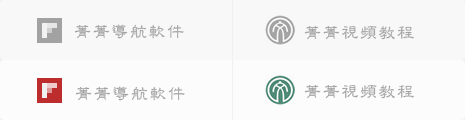
<style>
.page{position:relative;width:465px;height:120px;background:#fcfcfc}
.page>*{position:absolute;margin:0}
.t1{font:18px "TJenLei-Medium";letter-spacing:0.09em;color:#a2a2a2;scale:0.95 1}
</style>
<div class="page">
<p class="t1" style="left:74px;top:24px;width:110px;height:15px">菁菁导航软件</p>
<p class="t1" style="left:304px;top:26px;width:110px;height:14px">菁菁视频教程</p>
<p class="t1" style="left:75px;top:86px;width:110px;height:15px">菁菁导航软件</p>
<p class="t1" style="left:304px;top:85px;width:110px;height:14px">菁菁视频教程</p>
</div>
